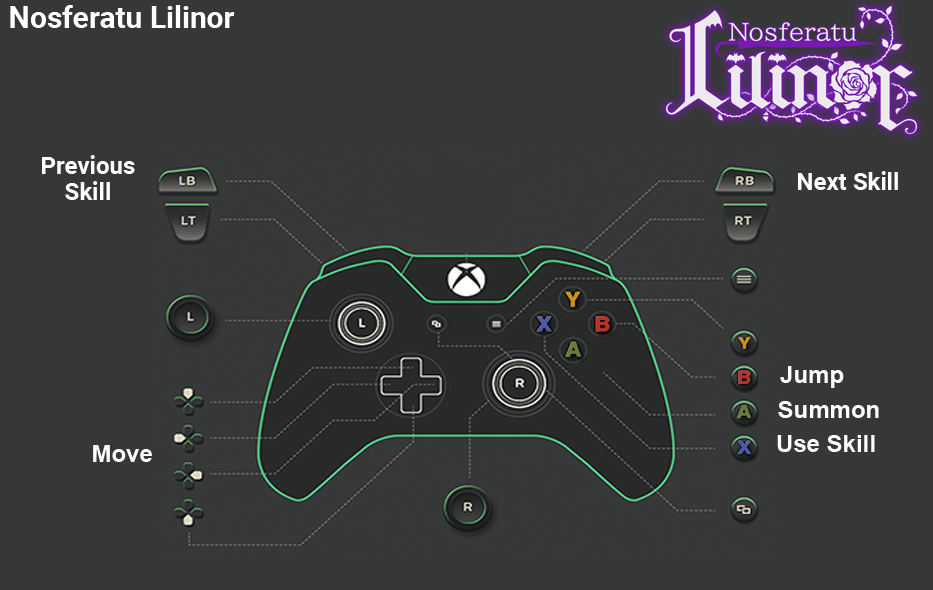
<style>
.page{position:relative;width:933px;height:590px;background:#363838}
.page>*{position:absolute;margin:0}
.t1{font:30px "Roboto-Bold";color:#ffffff}
.t2{font:24px/26px "Roboto-Bold";color:#ffffff}
.t3{font:24px "Roboto-Bold";color:#ffffff}
.t4{font:24px "Arial-BoldMT";color:#fefefe}
</style>
<div class="page">
<p class="t1" style="left:10px;top:5px;width:225px;height:23px">Nosferatu Lilinor</p>
<p class="t2" style="left:42px;top:155px;width:93px;height:45px;text-align:center">Previous<br>Skill</p>
<p class="t3" style="left:798px;top:171px;width:100px;height:19px">Next Skill</p>
<p class="t4" style="left:780px;top:366px;width:64px;height:22px">Jump</p>
<p class="t4" style="left:778px;top:401px;width:101px;height:17px">Summon</p>
<p class="t4" style="left:777px;top:435px;width:98px;height:17px">Use Skill</p>
<p class="t4" style="left:93px;top:445px;width:59px;height:17px">Move</p>
</div>
